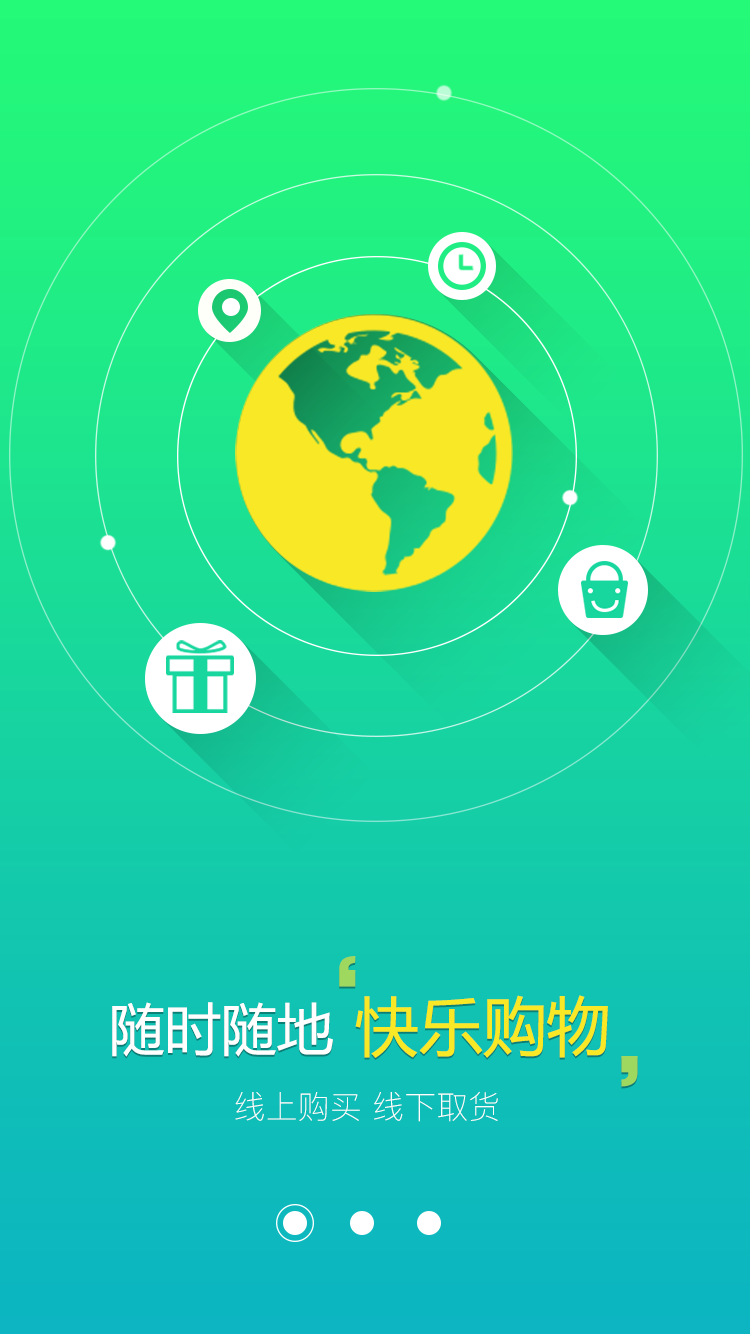
<style>
.page{position:relative;width:750px;height:1334px}
.page>*{position:absolute;margin:0}
.t1{font:80px "hzgb";color:#9ed85e}
.t2{font:64px "MicrosoftYaHei";color:#f9e826}
.t3{font:56px "MicrosoftYaHei";color:#ffffff}
.t4{font:32px "PingFang-SC-Light";color:#ffffff}
</style>
<div class="page">
<p class="t1" style="left:339px;top:956px;width:17px;height:31px">‘</p>
<p class="t2" style="left:355px;top:995px;width:253px;height:63px">快乐购物</p>
<p class="t3" style="left:112px;top:1002px;width:221px;height:55px">随时随地</p>
<p class="t1" style="left:621px;top:1056px;width:17px;height:31px">’</p>
<p class="t4" style="left:235px;top:1091px;width:263px;height:31px">线上购买 线下取货</p>
</div>
